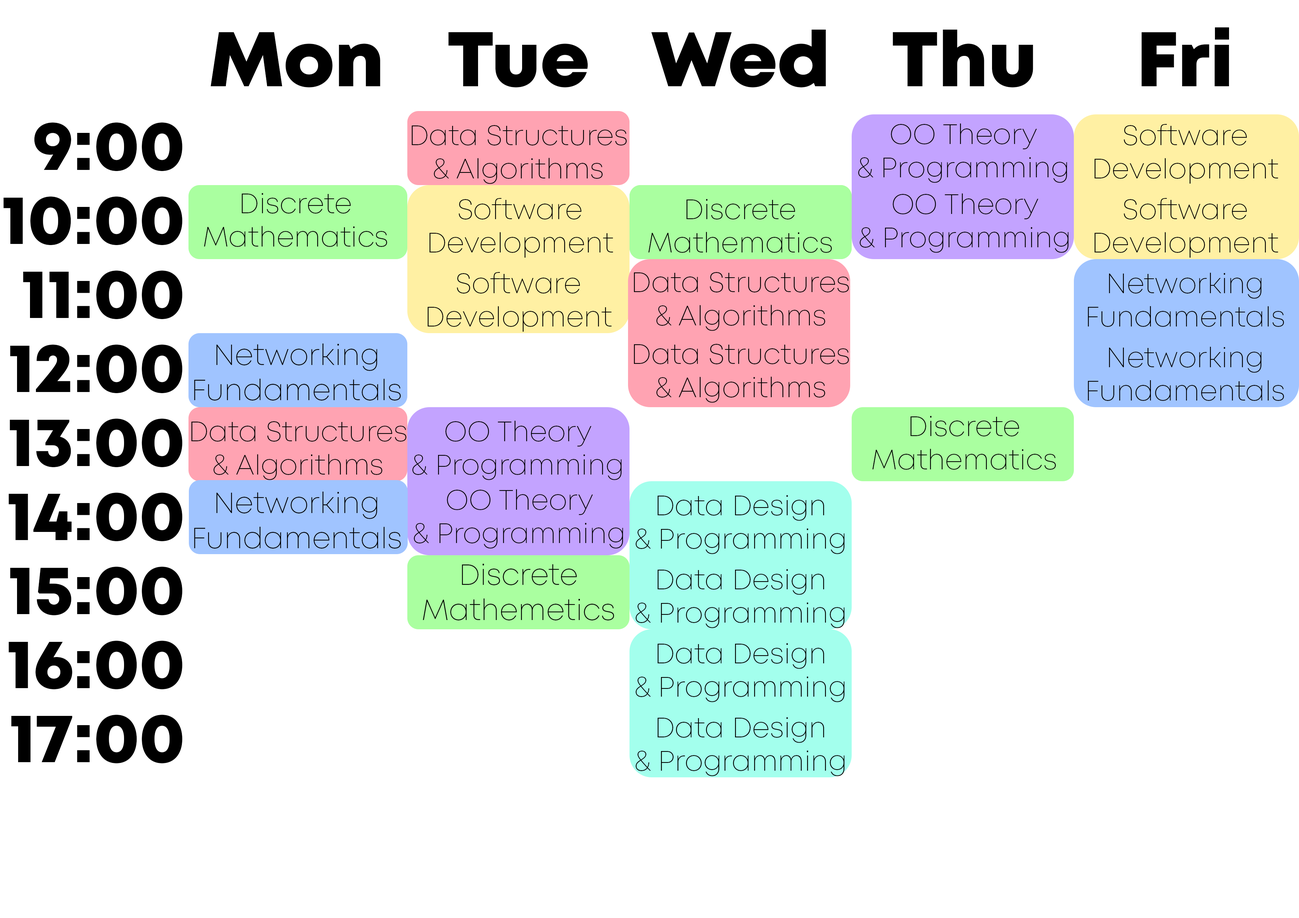
<style>
.page{position:relative;width:1299px;height:918px;background:#ffffff}
.page>*{position:absolute;margin:0}
.t1{font:77.1px "Mont-HeavyDEMO";color:#000000}
.t2{font:69.4px "Mont-HeavyDEMO";color:#000000}
.t3{font:27.8px "Mont-ExtraLightDEMO";color:#000000}
.t4{font:29.3px "Mont-ExtraLightDEMO";color:#000000}
</style>
<div class="page">
<p class="t1" style="left:651px;top:30px;width:175px;height:57px">Wed</p>
<p class="t1" style="left:893px;top:30px;width:140px;height:57px">Thu</p>
<p class="t1" style="left:1141px;top:27px;width:88px;height:59px">Fri</p>
<p class="t1" style="left:211px;top:32px;width:169px;height:55px">Mon</p>
<p class="t1" style="left:448px;top:32px;width:140px;height:55px">Tue</p>
<p class="t2" style="left:34px;top:123px;width:149px;height:48px">9:00</p>
<p class="t3" style="left:412px;top:125px;width:215px;height:59px;text-align:center">Data Structures<br>&amp; Algorithms</p>
<p class="t3" style="left:858px;top:123px;width:209px;height:60px;text-align:center">OO Theory<br>&amp; Programming</p>
<p class="t3" style="left:1094px;top:124px;width:184px;height:60px;text-align:center">Software<br>Development</p>
<p class="t2" style="left:3px;top:197px;width:180px;height:48px">10:00</p>
<p class="t3" style="left:204px;top:193px;width:183px;height:54px;text-align:center">Discrete<br>Mathematics</p>
<p class="t3" style="left:859px;top:193px;width:209px;height:60px;text-align:center">OO Theory<br>&amp; Programming</p>
<p class="t3" style="left:429px;top:198px;width:184px;height:60px;text-align:center">Software<br>Development</p>
<p class="t3" style="left:648px;top:199px;width:184px;height:54px;text-align:center">Discrete<br>Mathematics</p>
<p class="t3" style="left:1094px;top:198px;width:184px;height:60px;text-align:center">Software<br>Development</p>
<p class="t2" style="left:23px;top:271px;width:160px;height:49px">11:00</p>
<p class="t3" style="left:428px;top:272px;width:184px;height:60px;text-align:center">Software<br>Development</p>
<p class="t3" style="left:634px;top:272px;width:215px;height:59px;text-align:center">Data Structures<br>&amp; Algorithms</p>
<p class="t3" style="left:1088px;top:272px;width:196px;height:55px;text-align:center">Networking<br>Fundamentals</p>
<p class="t2" style="left:10px;top:345px;width:173px;height:49px">12:00</p>
<p class="t4" style="left:194px;top:344px;width:207px;height:57px;text-align:center">Networking<br>Fundamentals</p>
<p class="t3" style="left:634px;top:344px;width:215px;height:59px;text-align:center">Data Structures<br>&amp; Algorithms</p>
<p class="t3" style="left:1088px;top:347px;width:196px;height:54px;text-align:center">Networking<br>Fundamentals</p>
<p class="t2" style="left:10px;top:419px;width:173px;height:49px">13:00</p>
<p class="t3" style="left:191px;top:421px;width:216px;height:59px;text-align:center">Data Structures<br>&amp; Algorithms</p>
<p class="t3" style="left:412px;top:421px;width:210px;height:59px;text-align:center">OO Theory<br>&amp; Programming</p>
<p class="t3" style="left:872px;top:416px;width:184px;height:54px;text-align:center">Discrete<br>Mathematics</p>
<p class="t2" style="left:9px;top:493px;width:174px;height:49px">14:00</p>
<p class="t4" style="left:194px;top:492px;width:207px;height:57px;text-align:center">Networking<br>Fundamentals</p>
<p class="t3" style="left:414px;top:489px;width:209px;height:60px;text-align:center">OO Theory<br>&amp; Programming</p>
<p class="t3" style="left:635px;top:495px;width:209px;height:59px;text-align:center">Data Design<br>&amp; Programming</p>
<p class="t2" style="left:10px;top:567px;width:173px;height:49px">15:00</p>
<p class="t4" style="left:423px;top:564px;width:191px;height:56px;text-align:center">Discrete<br>Mathemetics</p>
<p class="t3" style="left:635px;top:569px;width:209px;height:59px;text-align:center">Data Design<br>&amp; Programming</p>
<p class="t2" style="left:9px;top:641px;width:174px;height:49px">16:00</p>
<p class="t3" style="left:635px;top:643px;width:209px;height:59px;text-align:center">Data Design<br>&amp; Programming</p>
<p class="t2" style="left:11px;top:715px;width:172px;height:49px">17:00</p>
<p class="t3" style="left:635px;top:717px;width:209px;height:59px;text-align:center">Data Design<br>&amp; Programming</p>
</div>
